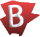
<style>
.page{position:relative;width:40px;height:37px;background:#ffffff}
.page>*{position:absolute;margin:0}
.t1{font:32px "MyriadPro-Regular";font-weight:bold}
</style>
<div class="page">
<p class="t1" style="left:8px;top:4px;width:16px;height:24px;rotate:-4deg">B</p>
</div>
